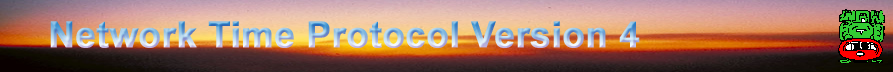
<style>
.page{position:relative;width:893px;height:72px}
.page>*{position:absolute;margin:0}
.t1{font:36px "Arial-BoldMT";font-weight:bold}
</style>
<div class="page">
<p class="t1" style="left:50px;top:21px;width:590px;height:27px">Network Time Protocol Version 4</p>
</div>
